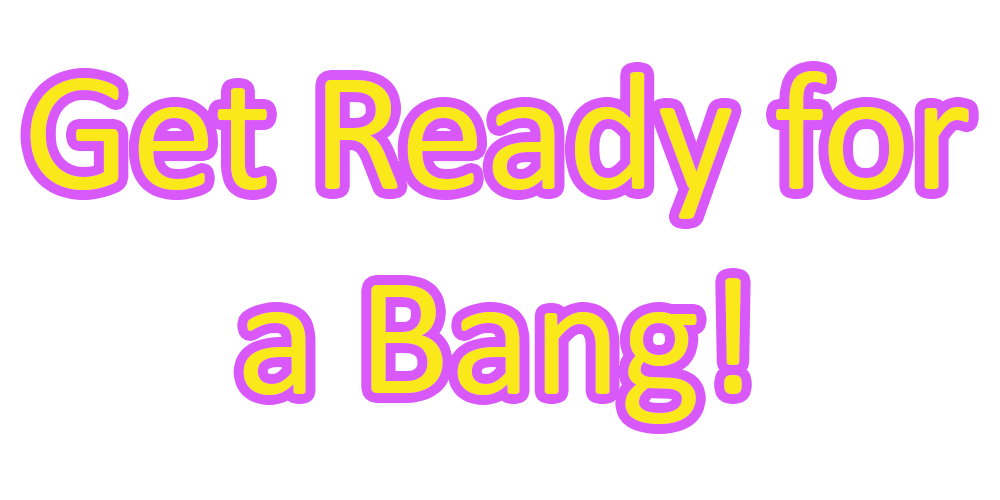
<style>
.page{position:relative;width:1000px;height:500px;background:#ffffff}
.page>*{position:absolute;margin:0}
.t1{font:170.8px "Calibri";color:#fae81b}
</style>
<div class="page">
<p class="t1" style="left:30px;top:71px;width:939px;height:353px;text-align:center">Get Ready for a Bang!</p>
</div>
